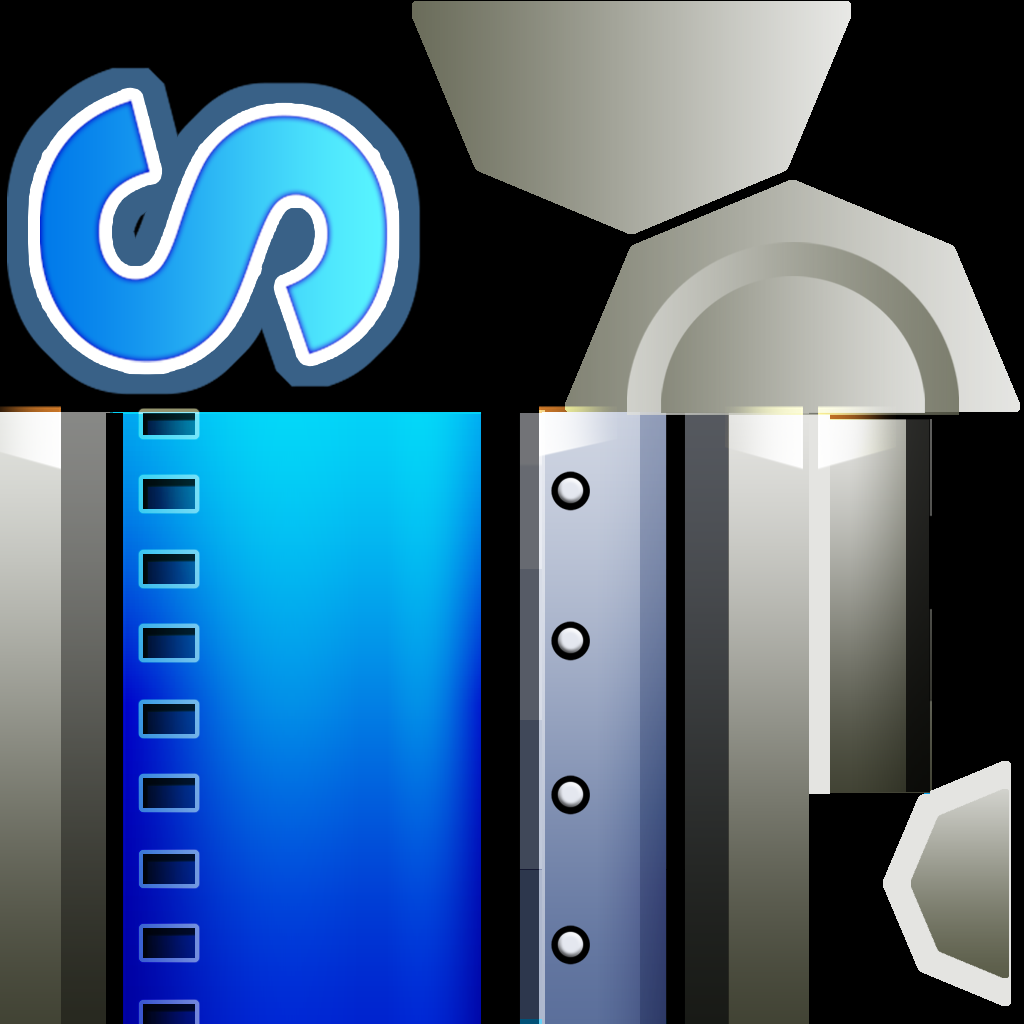
<style>
.page{position:relative;width:1024px;height:1024px;background:#000000}
.page>*{position:absolute;margin:0}
.t1{font:503.2px "FranklinGothic-DemiCond";text-transform:uppercase;scale:1.11 1}
</style>
<div class="page">
<p class="t1" style="left:40px;top:99px;width:348px;height:264px;rotate:90deg">s</p>
</div>
